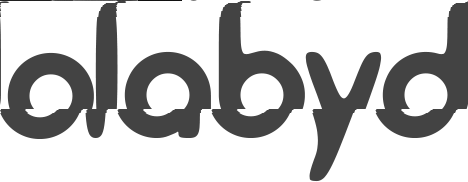
<style>
.page{position:relative;width:468px;height:182px;background:#ffffff}
.page>*{position:absolute;margin:0}
.t1{font:245.8px "AngelikaPlayfull";letter-spacing:-0.05em}
</style>
<div class="page">
<p class="t1" style="left:0px;top:0px;width:467px;height:182px">labydo</p>
</div>
